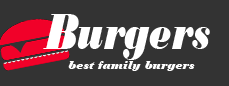
<style>
.page{position:relative;width:229px;height:86px;background:#333333}
.page>*{position:absolute;margin:0}
.t1{font:52.6px "BodoniMTBlack-Italic";color:#ffffff;scale:0.72 1}
.t2{font:12px "BodoniMTBlack-Italic";color:#ffffff}
</style>
<div class="page">
<p class="t1" style="left:43px;top:14px;width:167px;height:46px">Burgers</p>
<p class="t2" style="left:68px;top:61px;width:127px;height:10px">best family burgers</p>
</div>
